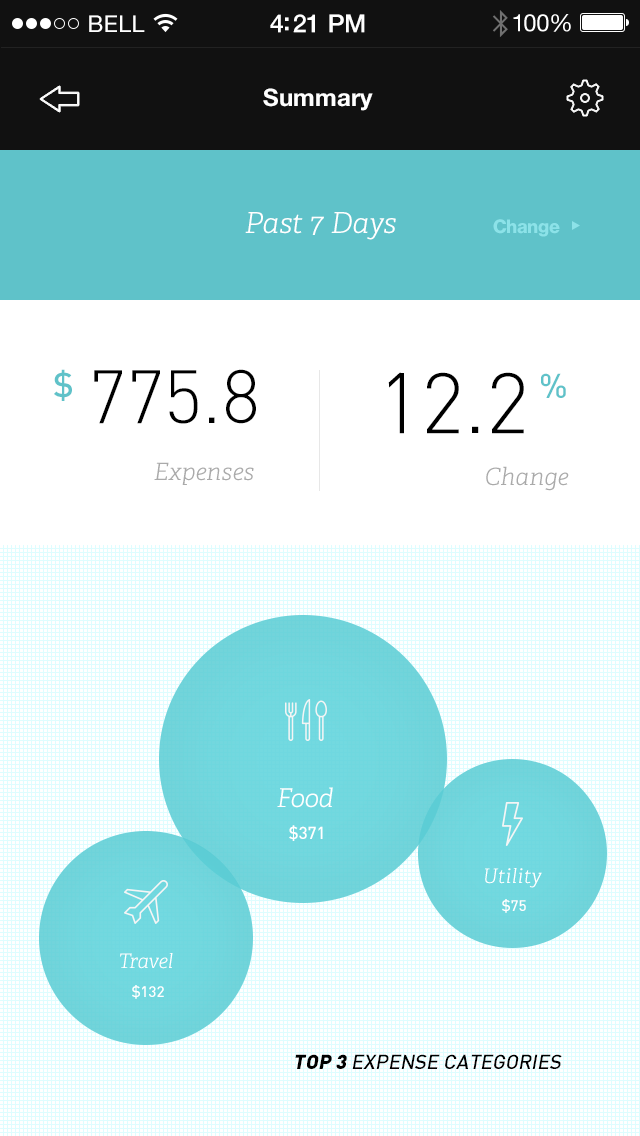
<style>
.page{position:relative;width:640px;height:1136px;background:#ffffff}
.page>*{position:absolute;margin:0}
.t1{font:23px "HelveticaNeue";letter-spacing:0.02em;color:#ffffff}
.t2{font:25px "HelveticaNeue-Medium";letter-spacing:-0.02em;color:#ffffff}
.t3{font:24px "HelveticaNeue";letter-spacing:-0.02em;color:#ffffff}
.t4{font:24px "HelveticaNeue-Bold";color:#ffffff}
.t5{font:29px "Adelle-LightItalic";color:#ffffff}
.t6{font:19px "HaasGrotDisp-75Bold";color:#8ce2e8}
.t7{font:34px "Dinmed";color:#5fc2c9}
.t8{font:74px "Dinlig";color:#000000}
.t9{font:84px "Dinlig";color:#000000}
.t10{font:24px "Adelle-LightItalic";color:#aaaaaa}
.t11{font:26px "Adelle-LightItalic";color:#ffffff}
.t12{font:17px "Dinmed";color:#ffffff}
.t13{font:20px "Adelle-LightItalic";color:#ffffff}
.t14{font:15px "Dinmed";color:#ffffff}
.t15{font:20px "Dinmed";color:#000000;text-transform:uppercase;font-style:italic}
.t16{font:20px "Dinbla";color:#000000;text-transform:uppercase;font-style:italic}
</style>
<div class="page">
<p class="t1" style="left:89px;top:15px;width:56px;height:17px">BELL</p>
<p class="t2" style="left:270px;top:14px;width:95px;height:19px">4:21 PM</p>
<p class="t3" style="left:513px;top:14px;width:58px;height:18px">100%</p>
<p class="t4" style="left:263px;top:88px;width:110px;height:23px">Summary</p>
<p class="t5" style="left:245px;top:212px;width:151px;height:28px">Past 7 Days</p>
<p class="t6" style="left:493px;top:219px;width:67px;height:18px">Change</p>
<p class="t7" style="left:54px;top:369px;width:18px;height:32px">$</p>
<p class="t8" style="left:94px;top:369px;width:162px;height:55px">775.8</p>
<p class="t9" style="left:388px;top:372px;width:136px;height:62px">12.2</p>
<p class="t7" style="left:541px;top:373px;width:25px;height:25px">%</p>
<p class="t10" style="left:154px;top:462px;width:100px;height:23px">Expenses</p>
<p class="t10" style="left:486px;top:466px;width:83px;height:25px">Change</p>
<p class="t11" style="left:277px;top:787px;width:56px;height:21px">Food</p>
<p class="t12" style="left:289px;top:825px;width:34px;height:16px">$371</p>
<p class="t13" style="left:485px;top:868px;width:57px;height:20px">Utility</p>
<p class="t14" style="left:502px;top:899px;width:24px;height:14px">$75</p>
<p class="t13" style="left:120px;top:953px;width:53px;height:16px">Travel</p>
<p class="t14" style="left:132px;top:985px;width:32px;height:14px">$132</p>
<p class="t15" style="left:295px;top:1054px;width:267px;height:15px"><span class="t16">Top 3 </span>Expense Categories</p>
</div>
